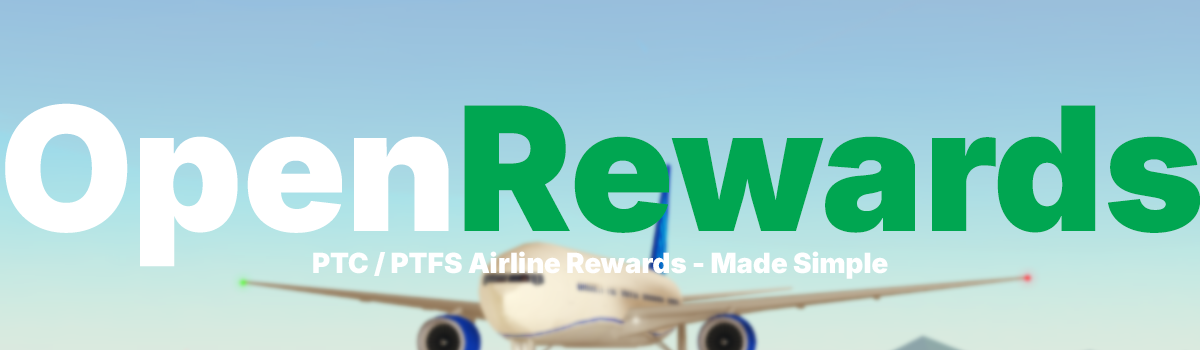
<style>
.page{position:relative;width:1200px;height:350px}
.page>*{position:absolute;margin:0}
.t1{font:172.3px "Inter18pt-Black";color:#00a651}
.t2{font:172.3px "Inter18pt-Black";color:#ffffff}
.t3{font:27.7px "Inter18pt-Black";color:#ffffff}
</style>
<div class="page">
<p class="t1" style="left:5px;top:103px;width:1196px;height:164px"><span class="t2">Open</span>Rewards</p>
<p class="t3" style="left:313px;top:251px;width:575px;height:28px">PTC / PTFS Airline Rewards - Made Simple</p>
</div>
